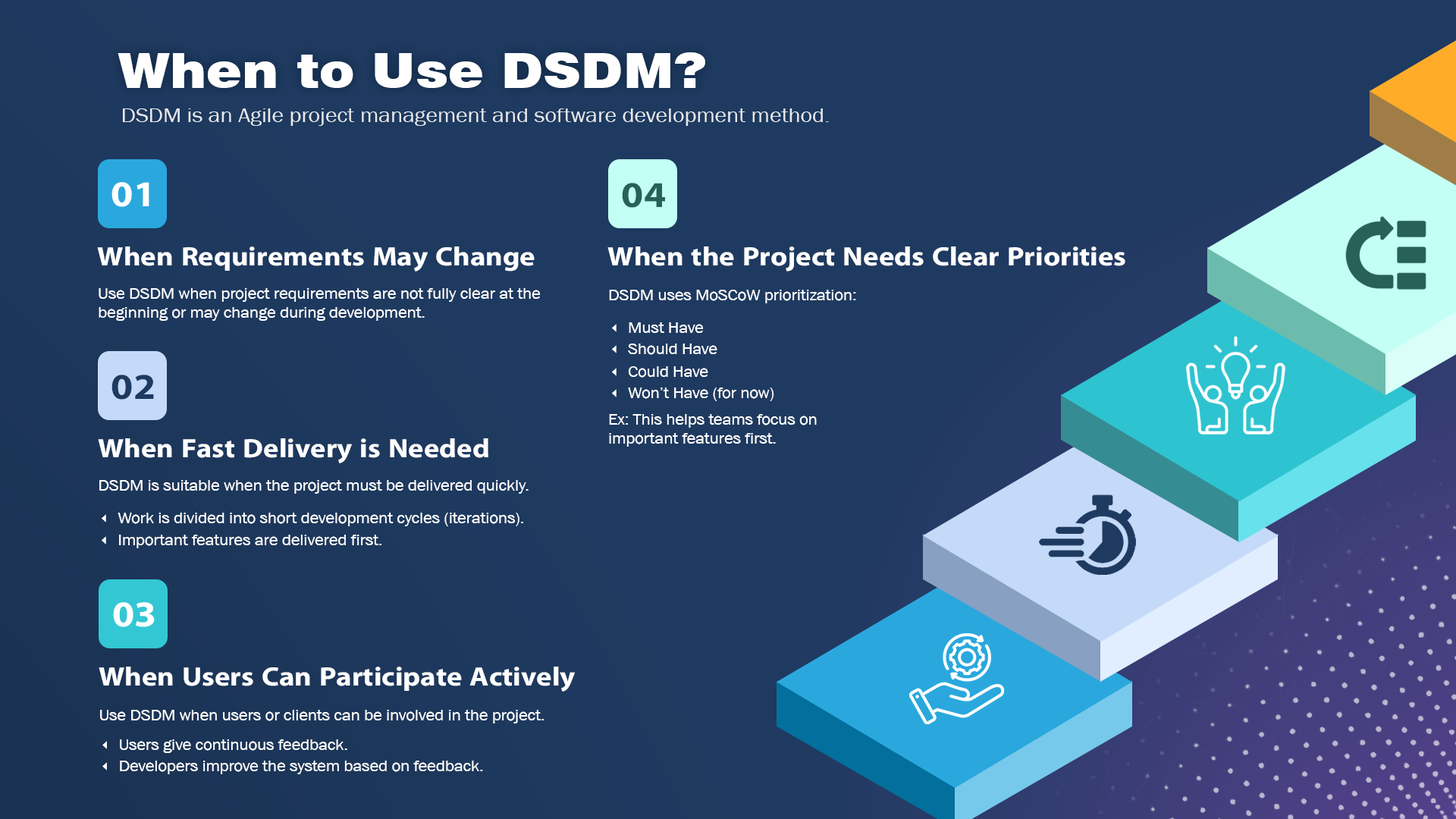
<style>
.page{position:relative;width:1456px;height:819px;background:#1e3a60}
.page>*{position:absolute;margin:0}
.t1{font:48.5px "Swiss721BT-Black";color:#ffffff;scale:1.1 1}
.t2{font:20.5px "AA-Khmer-AngDaunPov";color:#ffffff;scale:1.1 1}
.t3{font:36.4px "iKampuchea001_O'Chrov";color:#ffffff;scale:1.1 1}
.t4{font:36.4px "iKampuchea001_O'Chrov";color:#276157;scale:1.1 1}
.t5{font:26.7px "iKampuchea001_O'Chrov";color:#ffffff;scale:1.1 1}
.t6{font:15.6px "AA-Khmer-AngDaunPov";letter-spacing:-0.01em;color:#ffffff;scale:1.1 1}
.t7{font:36.4px "iKampuchea001_O'Chrov";color:#1e3a60;scale:1.1 1}
.t8{font:26.8px "iKampuchea001_O'Chrov";color:#ffffff;scale:1.09 1}
.t9{font:15.7px "AA-Khmer-AngDaunPov";letter-spacing:-0.01em;color:#ffffff;scale:1.1 1}
</style>
<div class="page">
<p class="t1" style="left:118px;top:52px;width:587px;height:36px">When to Use DSDM?</p>
<p class="t2" style="left:123px;top:108px;width:706px;height:18px;opacity:0.86">DSDM is an Agile project management and software development method.</p>
<p class="t3" style="left:111px;top:182px;width:38px;height:25px">01</p>
<p class="t4" style="left:622px;top:183px;width:43px;height:25px">04</p>
<p class="t5" style="left:97px;top:246px;width:438px;height:25px">When Requirements May Change</p>
<p class="t5" style="left:607px;top:246px;width:518px;height:25px">When the Project Needs Clear Priorities</p>
<p class="t6" style="left:99px;top:288px;width:442px;height:33px">Use DSDM when project requirements are not fully clear at the <br>beginning or may change during development.</p>
<p class="t6" style="left:609px;top:290px;width:247px;height:13px">DSDM uses MoSCoW prioritization:</p>
<p class="t6" style="left:629px;top:322px;width:75px;height:11px">Must Have</p>
<p class="t6" style="left:628px;top:344px;width:89px;height:11px">Should Have</p>
<p class="t7" style="left:111px;top:375px;width:43px;height:25px">02</p>
<p class="t6" style="left:628px;top:366px;width:80px;height:12px">Could Have</p>
<p class="t6" style="left:628px;top:388px;width:146px;height:13px">Won’t Have (for now)</p>
<p class="t6" style="left:609px;top:414px;width:208px;height:33px">Ex: This helps teams focus on <br>important features first.</p>
<p class="t8" style="left:98px;top:438px;width:390px;height:25px">When Fast Delivery is Needed</p>
<p class="t9" style="left:99px;top:480px;width:430px;height:14px">DSDM is suitable when the project must be delivered quickly.</p>
<p class="t9" style="left:118px;top:513px;width:405px;height:13px">Work is divided into short development cycles (iterations).</p>
<p class="t9" style="left:119px;top:535px;width:262px;height:13px">Important features are delivered first.</p>
<p class="t3" style="left:113px;top:602px;width:42px;height:25px">03</p>
<p class="t5" style="left:99px;top:667px;width:476px;height:25px">When Users Can Participate Actively</p>
<p class="t6" style="left:100px;top:710px;width:444px;height:13px">Use DSDM when users or clients can be involved in the project.</p>
<p class="t6" style="left:120px;top:739px;width:227px;height:14px">Users give continuous feedback.</p>
<p class="t6" style="left:120px;top:761px;width:363px;height:13px">Developers improve the system based on feedback.</p>
</div>
